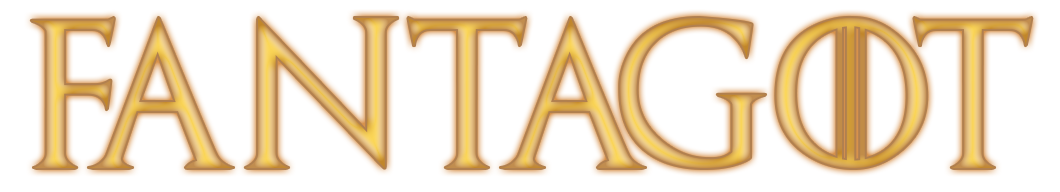
<style>
.page{position:relative;width:1060px;height:192px;background:#ffffff}
.page>*{position:absolute;margin:0}
.t1{font:150px "GameofThrones"}
</style>
<div class="page">
<p class="t1" style="left:31px;top:17px;width:1001px;height:151px">FANTAGOT</p>
</div>
